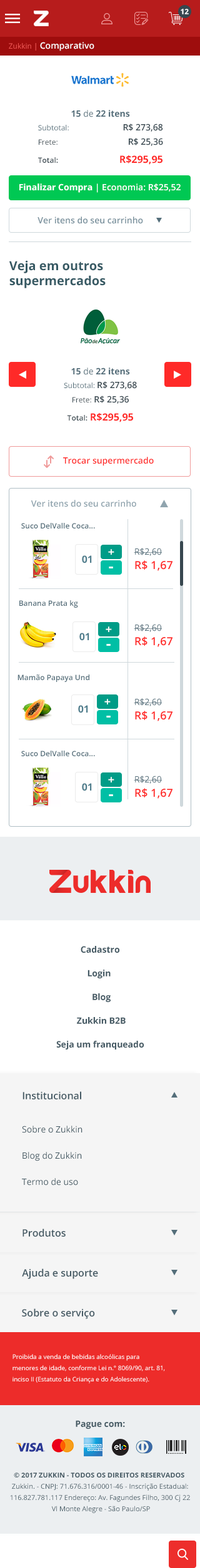
<style>
.page{position:relative;width:200px;height:1568px;background:#ffffff}
.page>*{position:absolute;margin:0}
.t1{font:7.5px "OpenSans-Bold";color:#ffffff;text-transform:uppercase}
.t2{font:8.7px "OpenSans-Semibold";color:#ffffff}
.t3{font:7.5px "OpenSans";color:#ef5350}
.t4{font:7.5px/13.7px "OpenSans";color:#546e7a}
.t5{font:8.7px/13.1px "OpenSans-Bold";color:#546e7a}
.t6{font:8.7px/13.1px "OpenSans";color:#546e7a}
.t7{font:8.7px/13.1px "OpenSans-Semibold";color:#37474f}
.t8{font:7.5px/14.4px "OpenSans";color:#37474f}
.t9{font:8.7px/14.4px "OpenSans-Semibold";color:#37474f}
.t10{font:7.5px/18.1px "OpenSans-Semibold";color:#37474f}
.t11{font:10px/18.1px "OpenSans-Bold";color:#ff2a28}
.t12{font:8.7px "OpenSans-Bold";color:#ffffff}
.t13{font:8.7px "OpenSans-Semibold";color:#78909c}
.t14{font:12.5px/15px "OpenSans-Bold";color:#375a64}
.t15{font:8.7px "OpenSans-Semibold";color:#ff2a28}
.t16{font:8.7px "OpenSans-Semibold";color:#90a4ae}
.t17{font:7.5px "OpenSans-Semibold";color:#546e7a}
.t18{font:10px "OpenSans-Bold";color:#507e8d}
.t19{font:11.2px "OpenSans-Bold";color:#ffffff}
.t20{font:11.2px/14.4px "OpenSans-Semibold";color:#ff2a28}
.t21{font:8.7px/21.8px "OpenSans";color:#546e7a}
.t22{font:15px "OpenSans-Bold";color:#ffffff}
.t23{font:8.7px/23.7px "OpenSans-Bold";color:#455a64}
.t24{font:10px "OpenSans-Semibold";color:#455a64}
.t25{font:8.7px/26.2px "OpenSans";color:#455a64}
.t26{font:6.2px/11.2px "OpenSans";color:#ffffff}
.t27{font:8.7px "OpenSans-Bold";color:#455a64}
.t28{font:6.9px/11.2px "OpenSans";color:#455a64}
.t29{font:6.9px/11.2px "OpenSans-Bold";color:#455a64}
</style>
<div class="page">
<p class="t1" style="left:180px;top:9px;width:8px;height:5px">12</p>
<p class="t2" style="left:9px;top:42px;width:85px;height:9px"><span class="t3">Zukkin | </span>Comparativo</p>
<p class="t4" style="left:38px;top:110px;width:125px;height:55px;text-align:justify"><span class="t5">15 </span><span class="t6">de </span><span class="t5">22 itens<br></span>Subtotal:  <span class="t7">R$ 273,68<br></span><span class="t8">Frete:    </span><span class="t9">R$ 25,36<br></span><span class="t10">Total:   </span><span class="t11">R$295,95</span></p>
<p class="t2" style="left:19px;top:183px;width:161px;height:10px"><span class="t12">Finalizar Compra</span> | Economia: R$25,52</p>
<p class="t13" style="left:37px;top:217px;width:106px;height:7px">Ver itens do seu carrinho</p>
<p class="t14" style="left:9px;top:260px;width:96px;height:28px">Veja em outros<br>supermercados</p>
<p class="t4" style="left:64px;top:368px;width:73px;height:54px;text-align:center"><span class="t5">15 </span><span class="t6">de </span><span class="t5">22 itens<br></span>Subtotal: <span class="t7">R$ 273,68<br></span><span class="t8">Frete: </span><span class="t9">R$ 25,36<br></span><span class="t10">Total: </span><span class="t11">R$295,95</span></p>
<p class="t15" style="left:63px;top:457px;width:90px;height:9px">Trocar supermercado</p>
<p class="t16" style="left:31px;top:500px;width:105px;height:7px">Ver itens do seu carrinho</p>
<p class="t17" style="left:21px;top:523px;width:74px;height:5px">Suco DelValle Coca...</p>
<p class="t18" style="left:82px;top:555px;width:10px;height:8px">01</p>
<p class="t19" style="left:108px;top:549px;width:6px;height:6px">+</p>
<p class="t20" style="left:134px;top:548px;width:38px;height:23px"><span class="t21">R$2,60<br></span>R$ 1,67</p>
<p class="t22" style="left:109px;top:567px;width:4px;height:1px">-</p>
<p class="t17" style="left:19px;top:600px;width:59px;height:8px">Banana Prata kg</p>
<p class="t19" style="left:105px;top:626px;width:7px;height:6px">+</p>
<p class="t20" style="left:134px;top:624px;width:38px;height:23px"><span class="t21">R$2,60<br></span>R$ 1,67</p>
<p class="t18" style="left:79px;top:633px;width:10px;height:8px">01</p>
<p class="t22" style="left:106px;top:644px;width:4px;height:2px">-</p>
<p class="t17" style="left:17px;top:674px;width:72px;height:8px">Mamão Papaya Und</p>
<p class="t19" style="left:104px;top:699px;width:6px;height:5px">+</p>
<p class="t20" style="left:134px;top:698px;width:38px;height:23px"><span class="t21">R$2,60<br></span>R$ 1,67</p>
<p class="t18" style="left:78px;top:705px;width:10px;height:8px">01</p>
<p class="t22" style="left:106px;top:716px;width:4px;height:2px">-</p>
<p class="t17" style="left:21px;top:751px;width:74px;height:5px">Suco DelValle Coca...</p>
<p class="t18" style="left:82px;top:783px;width:10px;height:8px">01</p>
<p class="t19" style="left:108px;top:777px;width:6px;height:5px">+</p>
<p class="t20" style="left:134px;top:776px;width:38px;height:23px"><span class="t21">R$2,60<br></span>R$ 1,67</p>
<p class="t22" style="left:109px;top:794px;width:4px;height:2px">-</p>
<p class="t23" style="left:56px;top:946px;width:88px;height:103px;text-align:center">Cadastro<br>Login <br> Blog<br> Zukkin B2B<br>Seja um franqueado</p>
<p class="t24" style="left:22px;top:1091px;width:59px;height:8px">Institucional</p>
<p class="t25" style="left:22px;top:1126px;width:60px;height:60px">Sobre o Zukkin<br>Blog do Zukkin<br>Termo de uso</p>
<p class="t24" style="left:22px;top:1229px;width:44px;height:8px">Produtos</p>
<p class="t24" style="left:22px;top:1269px;width:76px;height:10px">Ajuda e suporte</p>
<p class="t24" style="left:22px;top:1308px;width:73px;height:11px">Sobre o serviço</p>
<p class="t26" style="left:12px;top:1354px;width:153px;height:29px">Proibida a venda de bebidas alcoólicas para<br>menores de idade, conforme Lei n.° 8069/90, art. 81,<br>inciso II (Estatuto da Criança e do Adolescente).</p>
<p class="t27" style="left:75px;top:1420px;width:50px;height:9px">Pague com:</p>
<p class="t28" style="left:10px;top:1473px;width:180px;height:40px;text-align:center"><span class="t29">© 2017 ZUKKIN - TODOS OS DIREITOS RESERVADOS <br></span>Zukkin. - CNPJ: 71.676.316/0001-46 - Inscrição Estadual:<br>116.827.781.117 Endereço: Av. Fagundes Filho, 300 Cj 22<br> Vl Monte Alegre - São Paulo/SP</p>
</div>
